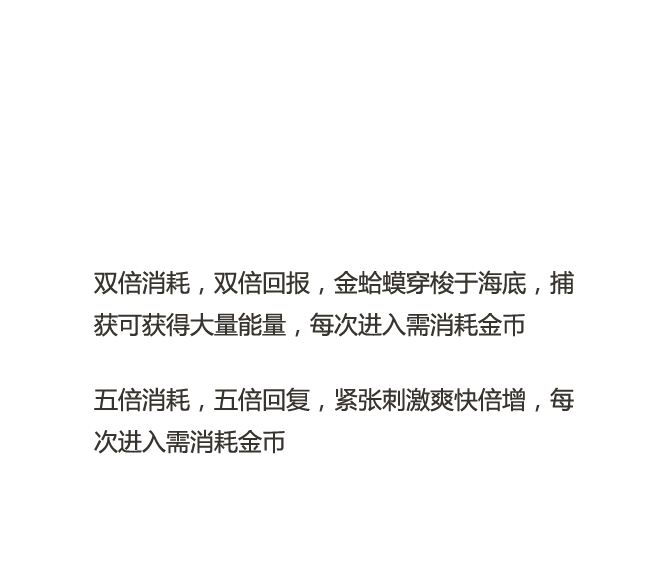
<style>
.page{position:relative;width:662px;height:564px;background:#ffffff}
.page>*{position:absolute;margin:0}
.t1{font:24px "MicrosoftYaHeiUI";color:#37332e}
</style>
<div class="page">
<p class="t1" style="left:94px;top:270px;width:480px;height:67px">双倍消耗，双倍回报，金蛤蟆穿梭于海底，捕<br>获可获得大量能量，每次进入需消耗金币</p>
<p class="t1" style="left:94px;top:387px;width:480px;height:67px">五倍消耗，五倍回复，紧张刺激爽快倍增，每<br>次进入需消耗金币</p>
</div>
